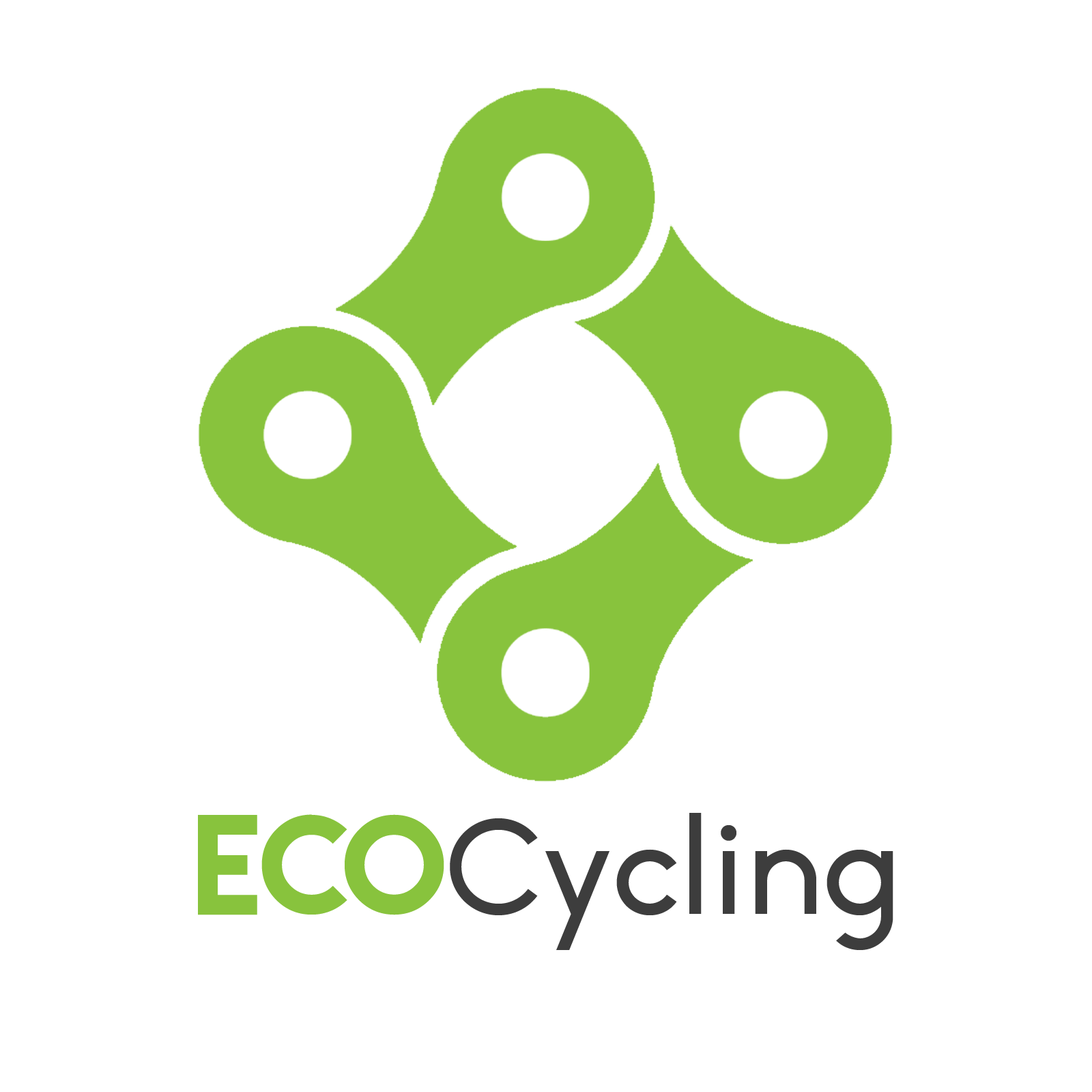
<style>
.page{position:relative;width:1092px;height:1092px;background:#ffffff}
.page>*{position:absolute;margin:0}
.t1{font:137.7px "Biko";color:#3d3d3d}
.t2{font:124.6px "LemonMilk";color:#88c33d}
.t3{font:130.3px "Biko";color:#3d3d3d}
</style>
<div class="page">
<p class="t1" style="left:198px;top:813px;width:695px;height:137px"><span class="t2">Eco</span><span class="t3">C</span>ycling</p>
</div>
